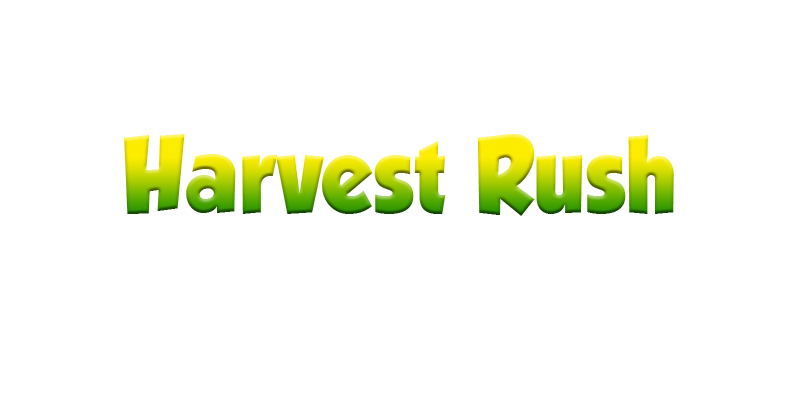
<style>
.page{position:relative;width:800px;height:400px;background:#ffffff}
.page>*{position:absolute;margin:0}
.t1{font:96px "GROBOLD";letter-spacing:0.015em;scale:0.9 1}
</style>
<div class="page">
<p class="t1" style="left:124px;top:134px;width:550px;height:82px">Harvest Rush</p>
</div>
